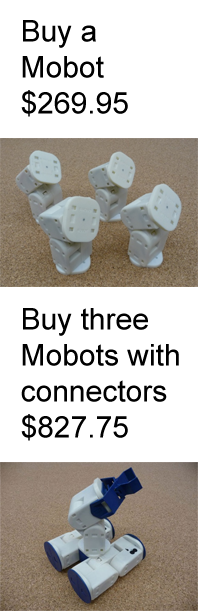
<style>
.page{position:relative;width:198px;height:611px;background:#ffffff}
.page>*{position:absolute;margin:0}
.t1{font:30px "ArialMT";color:#000000}
</style>
<div class="page">
<p class="t1" style="left:21px;top:20px;width:107px;height:97px">Buy a<br>Mobot<br>$269.95</p>
<p class="t1" style="left:21px;top:308px;width:158px;height:133px">Buy three <br>Mobots with<br>connectors<br>$827.75</p>
</div>
